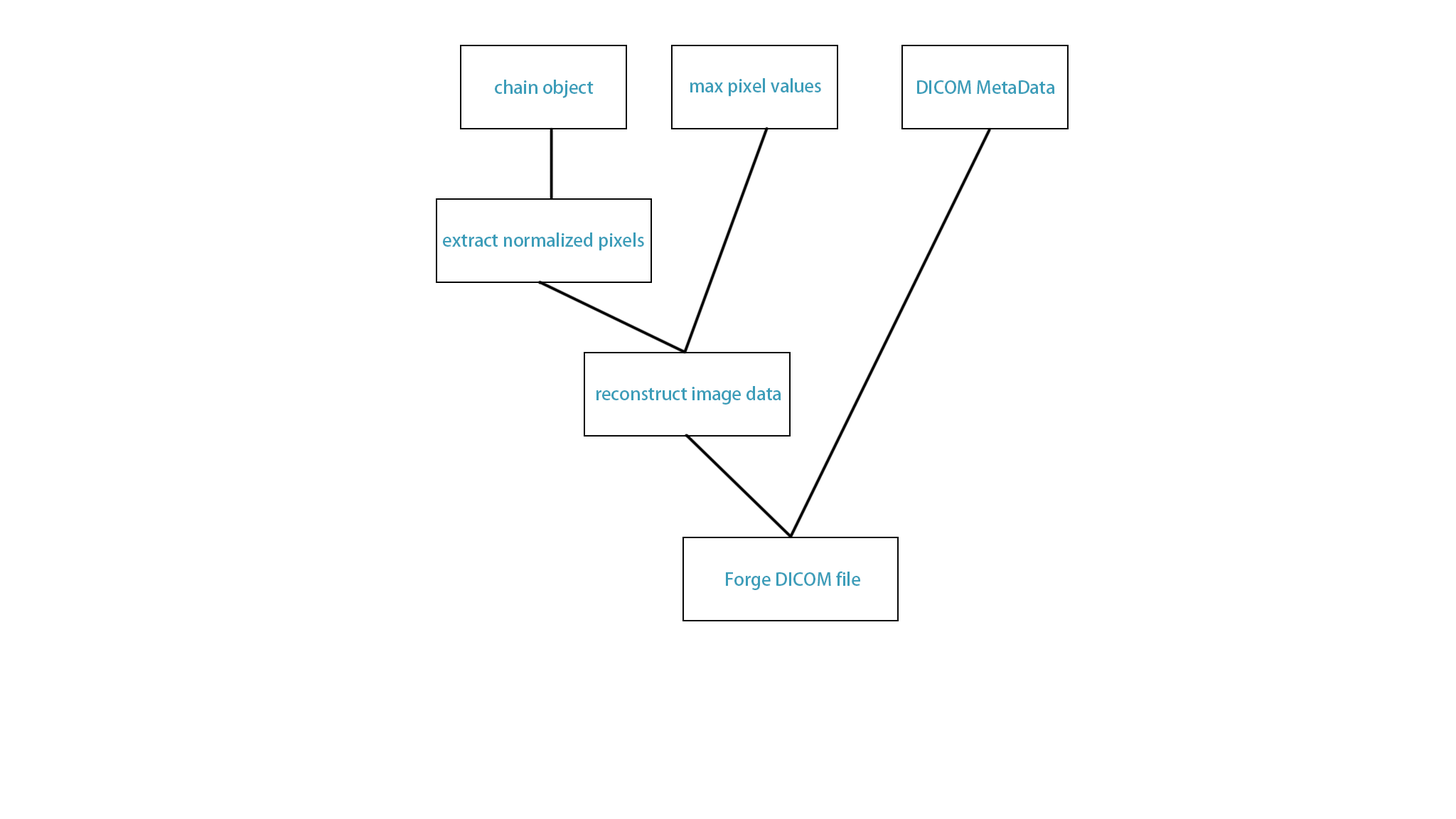
<style>
.page{position:relative;width:1456px;height:819px;background:#ffffff}
.page>*{position:absolute;margin:0}
.t1{font:17.8px "AdobeHeitiStd-Regular";color:#3c9db9}
</style>
<div class="page">
<p class="t1" style="left:495px;top:80px;width:99px;height:18px">chain object</p>
<p class="t1" style="left:690px;top:78px;width:131px;height:19px">max pixel values</p>
<p class="t1" style="left:917px;top:80px;width:138px;height:14px">DICOM MetaData</p>
<p class="t1" style="left:443px;top:232px;width:201px;height:19px">extract normalized pixels</p>
<p class="t1" style="left:596px;top:386px;width:185px;height:19px">reconstruct image data</p>
<p class="t1" style="left:726px;top:571px;width:134px;height:19px">Forge DICOM file</p>
</div>
